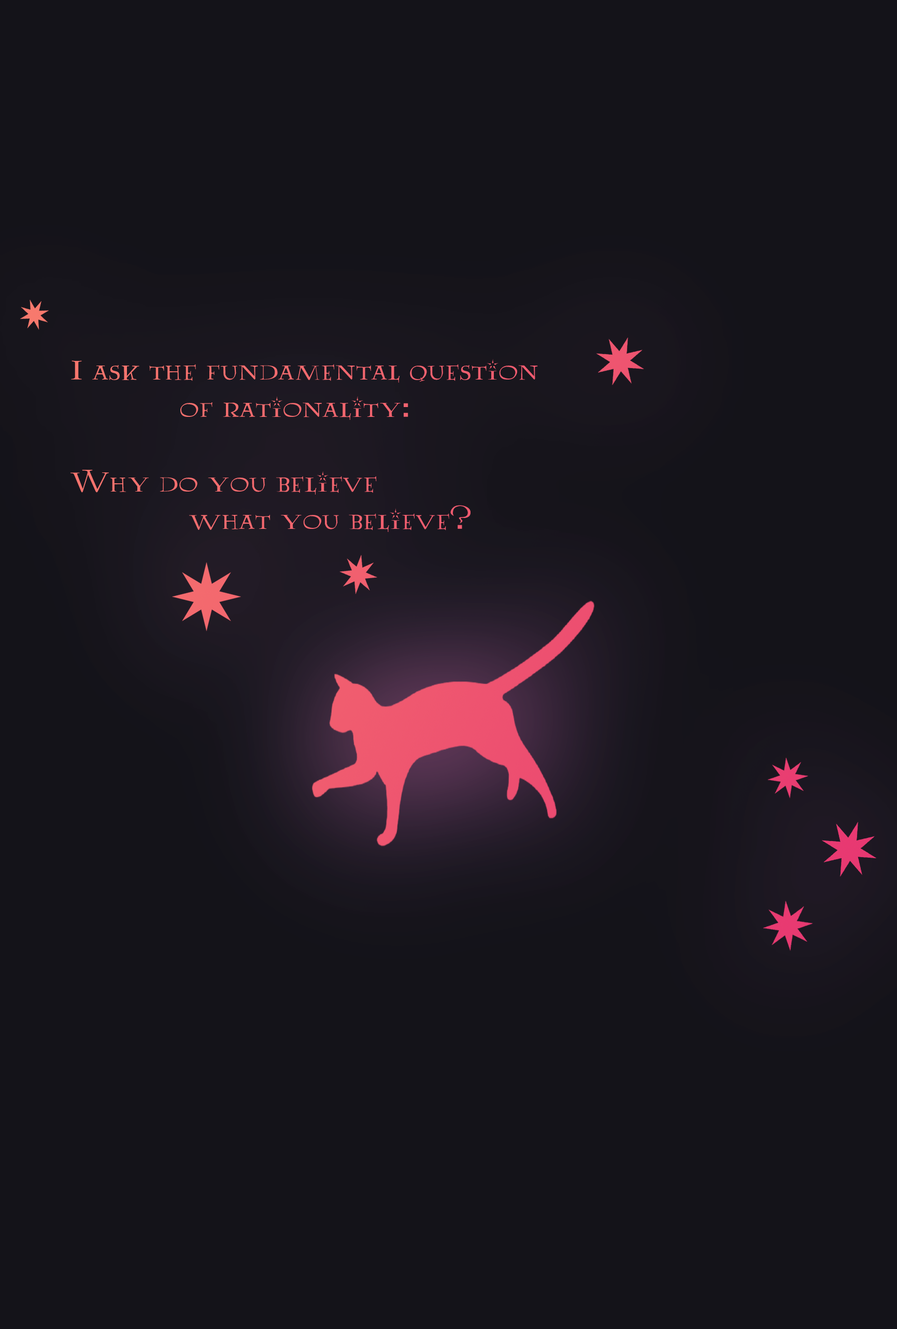
<style>
.page{position:relative;width:897px;height:1329px;background:#141319}
.page>*{position:absolute;margin:0}
.t1{font:31.1px "Lumos";color:#f3686e}
</style>
<div class="page">
<p class="t1" style="left:70px;top:358px;width:468px;height:174px">I ask the fundamental question<br>            of rationality:<br><br>Why do you believe<br>             what you believe?</p>
</div>
